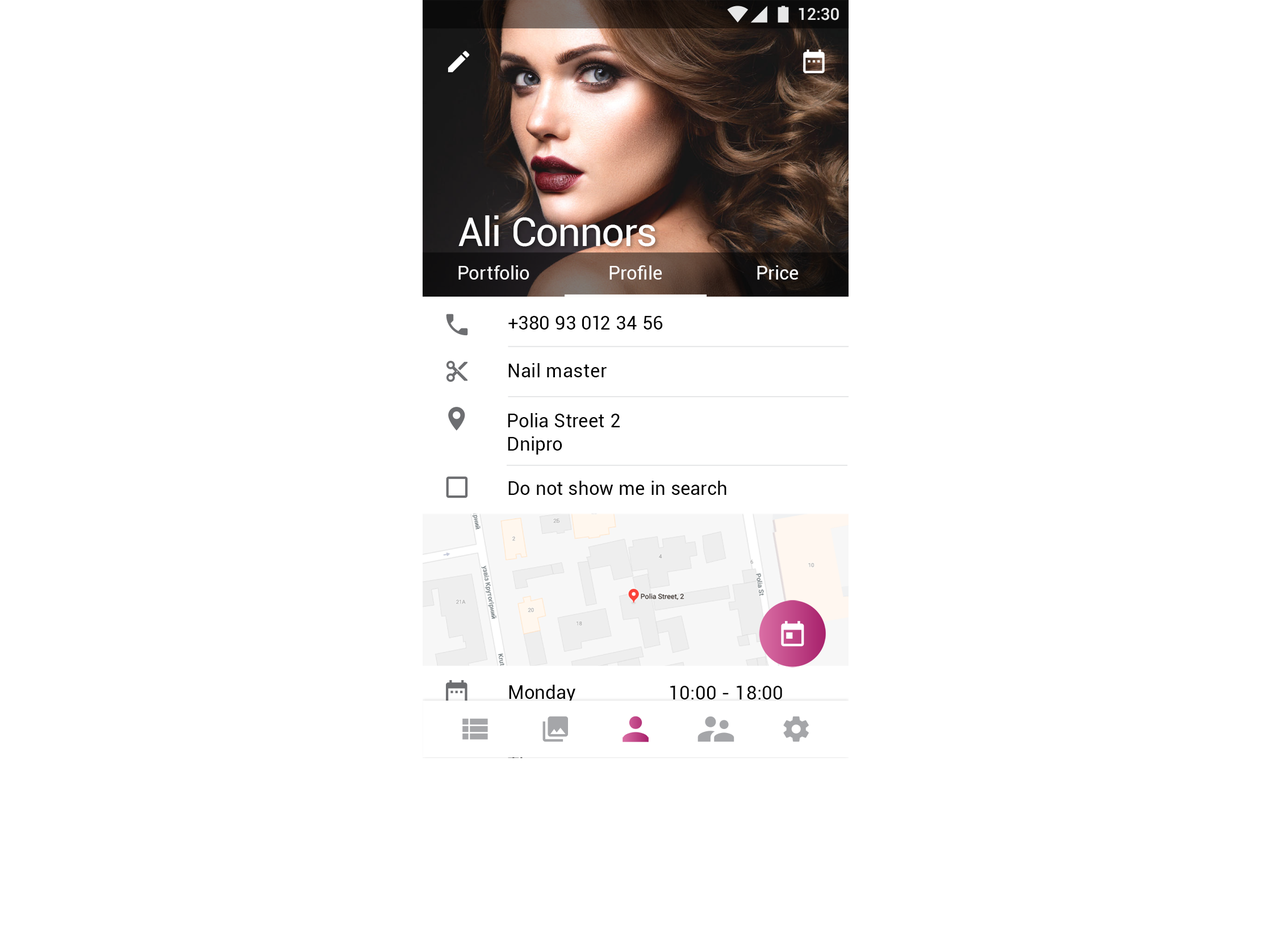
<style>
.page{position:relative;width:1278px;height:933px;background:#ffffff}
.page>*{position:absolute;margin:0}
.t1{font:16.6px "Roboto-Medium";color:#ffffff}
.t2{font:40.2px "Roboto-Regular";letter-spacing:-0.005em;color:#ffffff}
.t3{font:18.9px "Roboto-Regular";letter-spacing:0.01em;color:#ffffff}
.t4{font:18.9px "Roboto-Regular";letter-spacing:0.01em;color:#000000}
.t5{font:18.9px/18.9px "Roboto-Regular";letter-spacing:0.01em;color:#000000}
.t6{font:18.9px/23.7px "Roboto-Regular";letter-spacing:0.01em;color:#000000}
.t7{font:18.9px/23.7px "Roboto-Regular";letter-spacing:0.01em}
</style>
<div class="page">
<p class="t1" style="left:799px;top:8px;width:40px;height:12px">12:30</p>
<p class="t2" style="left:458px;top:215px;width:198px;height:32px">Ali Connors</p>
<p class="t3" style="left:458px;top:265px;width:71px;height:15px">Portfolio</p>
<p class="t3" style="left:610px;top:265px;width:52px;height:15px">Profile</p>
<p class="t3" style="left:757px;top:265px;width:41px;height:15px">Price</p>
<p class="t4" style="left:508px;top:315px;width:155px;height:15px">+380 93 012 34 56</p>
<p class="t4" style="left:508px;top:363px;width:99px;height:14px">Nail master</p>
<p class="t5" style="left:508px;top:413px;width:112px;height:41px">Polia Street 2<br><span class="t6">Dnipro</span></p>
<p class="t4" style="left:508px;top:481px;width:219px;height:14px">Do not show me in search</p>
<p class="t7" style="left:508px;top:685px;width:96px;height:109px">Monday<br>Tuesday<br>Wednesdey<br>Thu<br>Fri</p>
<p class="t7" style="left:670px;top:685px;width:112px;height:62px">10:00 - 18:00<br>10:00 - 18:00<br>10:00 - 18:00</p>
</div>
